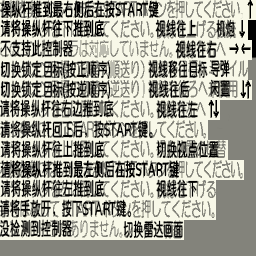
<style>
.page{position:relative;width:256px;height:256px;background:#f8f8e8}
.page>*{position:absolute;margin:0}
.t1{font:19px "ChillRoundFBold";color:#000000}
.t2{font:19px "ChillRoundFBold";color:#000000;scale:0.89 1}
.t3{font:19px "ChillRoundFBold";color:#000000;scale:0.95 1}
.t4{font:19px "ChillRoundFBold";color:#000000;scale:0.96 1}
</style>
<div class="page">
<p class="t1" style="left:1px;top:0px;width:158px;height:18px">操纵杆推到最右侧后在按START键</p>
<p class="t1" style="left:0px;top:19px;width:104px;height:18px">请将操纵杆往下推到底</p>
<p class="t1" style="left:155px;top:19px;width:42px;height:19px">视线往上</p>
<p class="t2" style="left:216px;top:19px;width:19px;height:19px">机炮</p>
<p class="t1" style="left:0px;top:39px;width:73px;height:19px">不支持此控制器</p>
<p class="t1" style="left:175px;top:40px;width:42px;height:19px">视线往右</p>
<p class="t1" style="left:0px;top:60px;width:111px;height:20px">切换锁定目标(按正顺序)</p>
<p class="t3" style="left:148px;top:60px;width:60px;height:19px">视线移往目标</p>
<p class="t3" style="left:210px;top:60px;width:20px;height:18px">导弹</p>
<p class="t1" style="left:0px;top:80px;width:111px;height:20px">切换锁定目标(按逆顺序)</p>
<p class="t1" style="left:148px;top:80px;width:42px;height:19px">视线往后</p>
<p class="t1" style="left:210px;top:79px;width:20px;height:18px">闲置</p>
<p class="t1" style="left:0px;top:99px;width:114px;height:19px">请将操纵杆往右边推到底</p>
<p class="t1" style="left:156px;top:100px;width:42px;height:19px">视线往左</p>
<p class="t1" style="left:0px;top:120px;width:153px;height:19px">请将操纵杆回正后，按START键。</p>
<p class="t1" style="left:0px;top:140px;width:104px;height:19px">请将操纵杆往上推到底</p>
<p class="t1" style="left:156px;top:140px;width:63px;height:19px">切换视点位置</p>
<p class="t1" style="left:0px;top:160px;width:179px;height:18px">请将操纵杆推到最左侧后在按START键</p>
<p class="t1" style="left:0px;top:179px;width:104px;height:19px">请将操纵杆往左推到底</p>
<p class="t1" style="left:156px;top:179px;width:42px;height:19px">视线往下</p>
<p class="t1" style="left:0px;top:199px;width:132px;height:19px">请将手放开，按下START键。</p>
<p class="t1" style="left:0px;top:219px;width:72px;height:19px">没检测到控制器</p>
<p class="t4" style="left:123px;top:220px;width:61px;height:19px">切换雷达画面</p>
</div>
